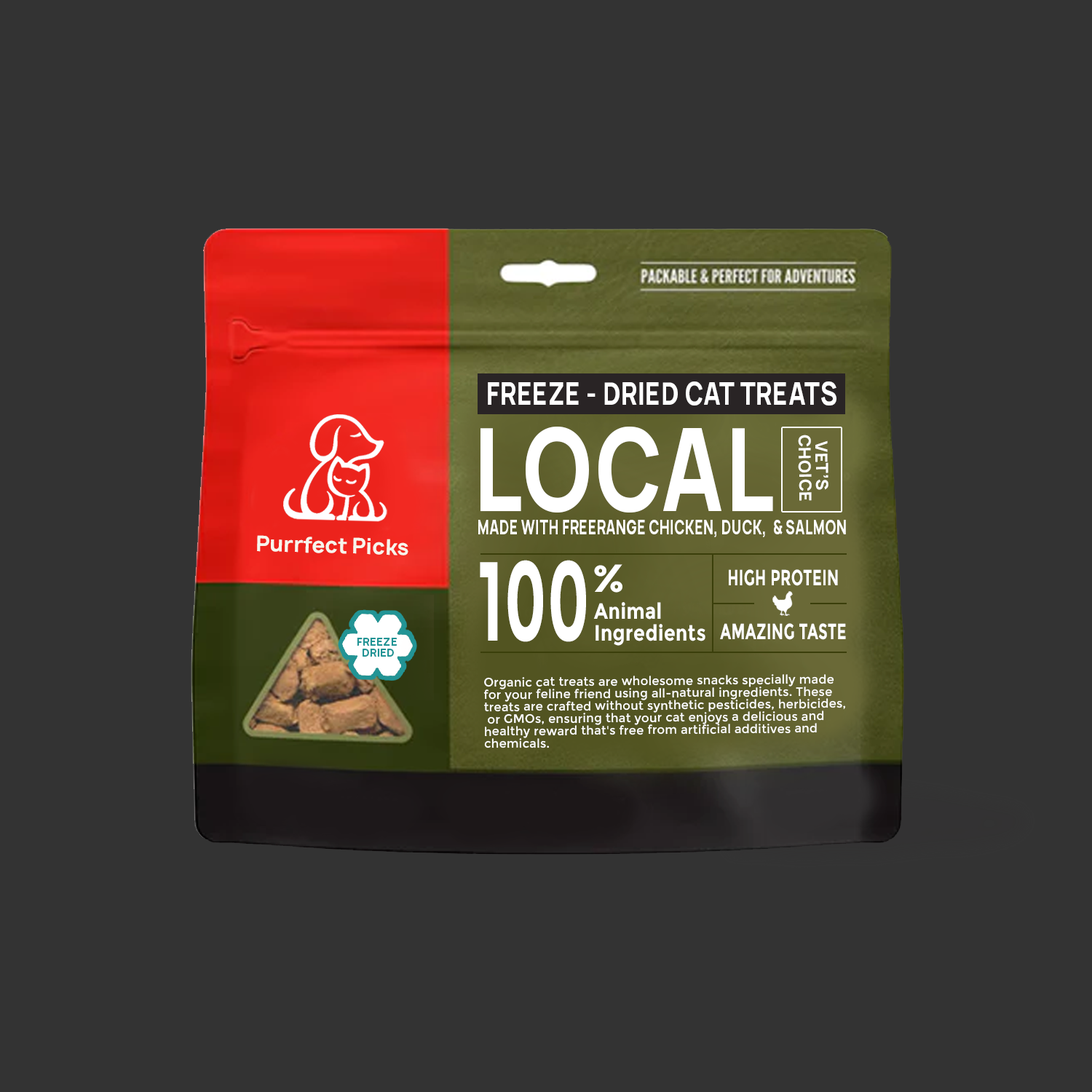
<style>
.page{position:relative;width:1092px;height:1092px;background:#333333}
.page>*{position:absolute;margin:0}
.t1{font:29.7px "Manrope-ExtraBold";letter-spacing:0.02em;color:#ffffff;scale:0.81 1}
.t2{font:110.3px "Manrope-ExtraBold";letter-spacing:0.02em;color:#ffffff;scale:0.79 1}
.t3{font:16px/16.8px "Manrope-ExtraBold";letter-spacing:0.02em;color:#ffffff}
.t4{font:19.3px "Manrope-ExtraBold";letter-spacing:0.02em;color:#ffffff;scale:0.7 1}
.t5{font:20.8px "Manrope-ExtraBold";color:#f7f5ec}
.t6{font:112.2px "Montserrat-Bold";letter-spacing:0.02em;color:#ffffff;scale:0.54 1}
.t7{font:39px "Montserrat-Bold";letter-spacing:0.02em;color:#ffffff;scale:1.04 1}
.t8{font:21.9px "Montserrat-Bold";letter-spacing:0.02em;color:#ffffff;scale:0.66 1}
.t9{font:21.9px/21.9px "Montserrat-Bold";letter-spacing:0.02em;color:#ffffff;scale:0.85 1}
.t10{font:12.3px/12.3px "Montserrat-Regular";letter-spacing:0.02em;color:#ffffff;scale:0.97 1}
</style>
<div class="page">
<p class="t1" style="left:488px;top:381px;width:348px;height:24px">FREEZE - DRIED CAT TREATS</p>
<p class="t2" style="left:480px;top:426px;width:293px;height:87px">LOCAL</p>
<p class="t3" style="left:798px;top:435px;width:30px;height:66px;text-align:center;rotate:90deg">VET’S<br> CHOICE</p>
<p class="t4" style="left:478px;top:520px;width:368px;height:17px">MADE WITH FREERANGE CHICKEN, DUCK,  &amp; SALMON</p>
<p class="t5" style="left:257px;top:535px;width:151px;height:20px;rotate:2deg">Purrfect Picks</p>
<p class="t6" style="left:480px;top:560px;width:106px;height:82px">100</p>
<p class="t7" style="left:594px;top:564px;width:28px;height:29px">%</p>
<p class="t8" style="left:729px;top:569px;width:109px;height:17px">HIGH PROTEIN</p>
<p class="t9" style="left:593px;top:602px;width:112px;height:44px;text-align:right">Animal<br>Ingredients</p>
<p class="t8" style="left:720px;top:623px;width:126px;height:17px">AMAZING TASTE</p>
<p class="t10" style="left:483px;top:674px;width:362px;height:74px;text-align:right;rotate:-1deg">Organic cat treats are wholesome snacks specially made <br>for your feline friend using all-natural ingredients. These <br>treats are crafted without synthetic pesticides, herbicides,<br> or GMOs, ensuring that your cat enjoys a delicious and <br>healthy reward that's free from artificial additives and <br>chemicals.</p>
</div>
